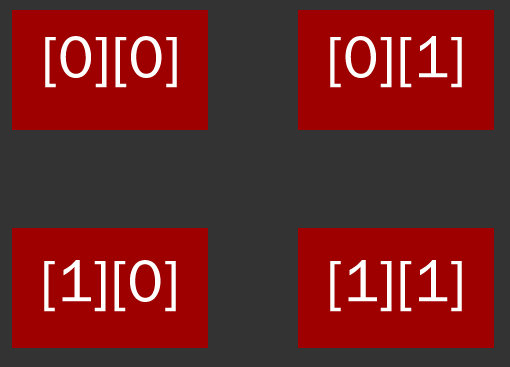
<style>
.page{position:relative;width:510px;height:367px;background:#333333}
.page>*{position:absolute;margin:0}
.t1{font:60px "FranklinGothic-Book";color:#ffffff}
</style>
<div class="page">
<p class="t1" style="left:45px;top:36px;width:132px;height:52px">[0][0]</p>
<p class="t1" style="left:330px;top:36px;width:132px;height:52px">[0][1]</p>
<p class="t1" style="left:44px;top:260px;width:132px;height:52px">[1][0]</p>
<p class="t1" style="left:330px;top:260px;width:132px;height:52px">[1][1]</p>
</div>
